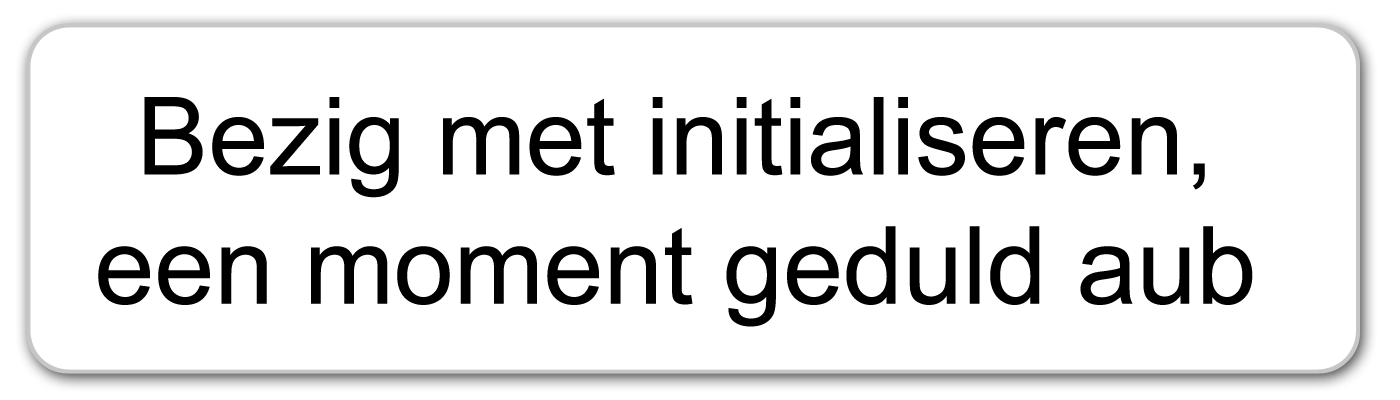
<style>
.page{position:relative;width:1400px;height:400px;background:#ffffff}
.page>*{position:absolute;margin:0}
.t1{font:107.7px "ArialMT";color:#000000}
</style>
<div class="page">
<p class="t1" style="left:98px;top:97px;width:1155px;height:230px;text-align:center">Bezig met initialiseren,<br>een moment geduld aub</p>
</div>
